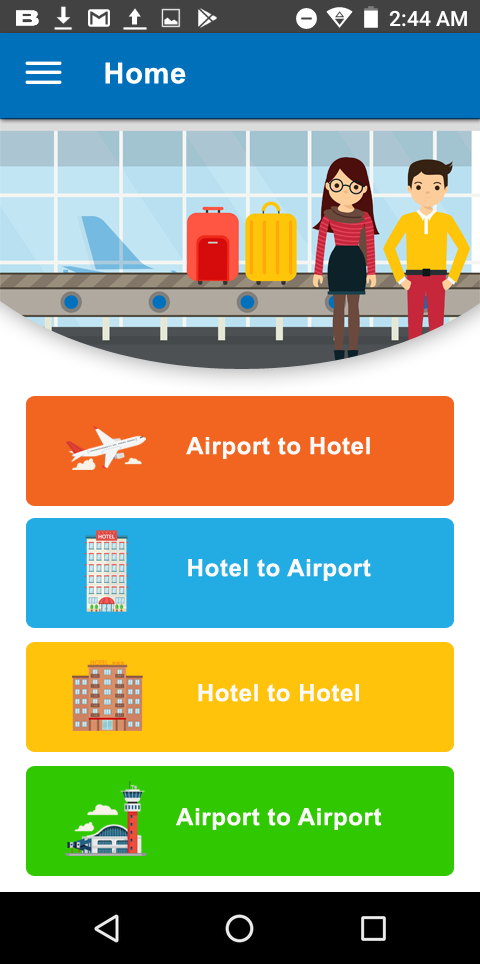
<style>
.page{position:relative;width:480px;height:964px}
.page>*{position:absolute;margin:0}
.t1{font:29px "Arial-BoldMT";letter-spacing:0.025em;color:#ffffff}
.t2{font:24px "Arial-BoldMT";letter-spacing:0.025em;color:#fafafa}
</style>
<div class="page">
<p class="t1" style="left:105px;top:62px;width:81px;height:22px">Home</p>
<p class="t2" style="left:186px;top:437px;width:184px;height:22px">Airport to Hotel</p>
<p class="t2" style="left:188px;top:559px;width:183px;height:22px">Hotel to Airport</p>
<p class="t2" style="left:198px;top:684px;width:161px;height:18px">Hotel to Hotel</p>
<p class="t2" style="left:176px;top:808px;width:206px;height:22px">Airport to Airport</p>
</div>
